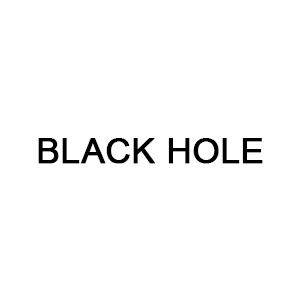
<style>
.page{position:relative;width:300px;height:300px;background:#ffffff}
.page>*{position:absolute;margin:0}
.t1{font:34.7px "ArialMT";color:#000000;font-weight:bold}
</style>
<div class="page">
<p class="t1" style="left:38px;top:138px;width:225px;height:26px">BLACK HOLE</p>
</div>
